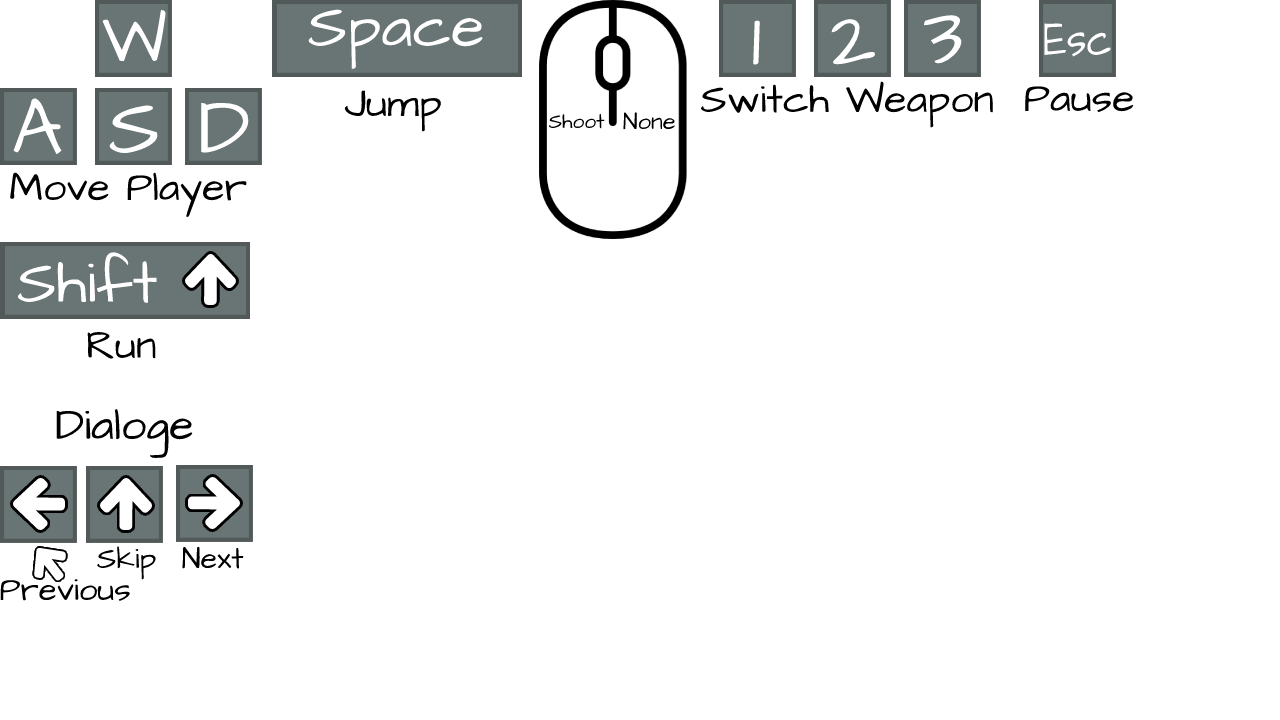
<style>
.page{position:relative;width:1280px;height:720px;background:#ffffff}
.page>*{position:absolute;margin:0}
.t1{font:68.8px "ArchitectsDaughter-Regular";color:#ffffff}
.t2{font:61.3px "ArchitectsDaughter-Regular";color:#ffffff}
.t3{font:87.4px "ArchitectsDaughter-Regular";color:#ffffff;scale:0.9 1}
.t4{font:80.2px "ArchitectsDaughter-Regular";color:#ffffff}
.t5{font:50.7px "ArchitectsDaughter-Regular";color:#ffffff;scale:0.78 1}
.t6{font:41.1px "ArchitectsDaughter-Regular";color:#000000}
.t7{font:23.8px "ArchitectsDaughter-Regular";color:#000000}
.t8{font:21.1px "ArchitectsDaughter-Regular";color:#000000}
.t9{font:44.9px "ArchitectsDaughter-Regular";color:#000000}
.t10{font:30.3px "ArchitectsDaughter-Regular";color:#000000}
.t11{font:33.1px "ArchitectsDaughter-Regular";color:#000000}
</style>
<div class="page">
<p class="t1" style="left:102px;top:10px;width:64px;height:51px">W</p>
<p class="t2" style="left:308px;top:9px;width:175px;height:60px">Space</p>
<p class="t3" style="left:924px;top:15px;width:38px;height:49px">3</p>
<p class="t4" style="left:753px;top:20px;width:7px;height:45px">1</p>
<p class="t4" style="left:831px;top:19px;width:45px;height:46px">2</p>
<p class="t5" style="left:1044px;top:23px;width:67px;height:34px">Esc</p>
<p class="t6" style="left:701px;top:81px;width:292px;height:47px">Switch Weapon</p>
<p class="t6" style="left:1025px;top:86px;width:109px;height:27px">Pause</p>
<p class="t4" style="left:13px;top:98px;width:49px;height:56px">A</p>
<p class="t4" style="left:201px;top:102px;width:48px;height:51px">D</p>
<p class="t6" style="left:344px;top:90px;width:97px;height:42px">Jump</p>
<p class="t4" style="left:109px;top:105px;width:49px;height:49px">S</p>
<p class="t7" style="left:623px;top:112px;width:52px;height:18px">None</p>
<p class="t8" style="left:549px;top:114px;width:56px;height:15px">Shoot</p>
<p class="t6" style="left:10px;top:172px;width:237px;height:45px">Move Player</p>
<p class="t2" style="left:17px;top:252px;width:140px;height:51px">Shift</p>
<p class="t6" style="left:87px;top:331px;width:69px;height:28px">Run</p>
<p class="t9" style="left:56px;top:409px;width:137px;height:49px">Dialoge</p>
<p class="t10" style="left:97px;top:546px;width:59px;height:34px">Skip</p>
<p class="t10" style="left:182px;top:546px;width:62px;height:23px">Next</p>
<p class="t11" style="left:0px;top:579px;width:130px;height:22px">Previous</p>
</div>
